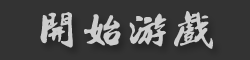
<style>
.page{position:relative;width:250px;height:60px;background:#333333}
.page>*{position:absolute;margin:0}
.t1{font:45.6px "SunYatsenHsingshu-";color:#cdcdcd}
</style>
<div class="page">
<p class="t1" style="left:40px;top:11px;width:173px;height:38px">开始游戏</p>
</div>
